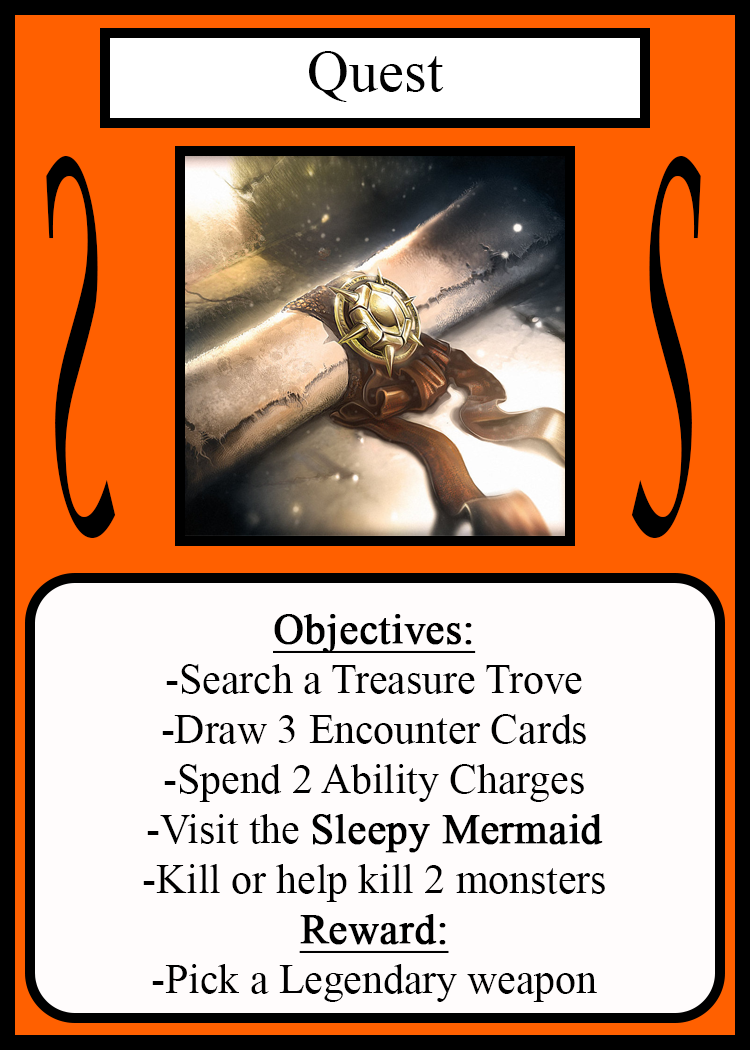
<style>
.page{position:relative;width:750px;height:1050px;background:#fffcfc}
.page>*{position:absolute;margin:0}
.t1{font:58.3px "TimesNewRomanPSMT";color:#010101}
.t2{font:504.3px "LucidaCalligraphy-Italic";color:#000000;scale:0.24 1}
.t3{font:504.1px "LucidaCalligraphy-Italic";color:#000000;scale:0.24 1}
.t4{font:41.7px "TimesNewRomanPSMT";color:#000000}
.t5{font:41.7px "TimesNewRomanPSMT";color:#000000;font-weight:bold;text-decoration:underline}
.t6{font:41.7px "TimesNewRomanPSMT";color:#000000;font-weight:bold}
</style>
<div class="page">
<p class="t1" style="left:309px;top:51px;width:135px;height:51px">Quest</p>
<p class="t2" style="left:46px;top:156px;width:70px;height:382px;rotate:180deg">S</p>
<p class="t3" style="left:631px;top:156px;width:70px;height:382px">S</p>
<p class="t4" style="left:143px;top:614px;width:462px;height:388px;text-align:center"><span class="t5">Objectives:<br></span>-Search a Treasure Trove<br>-Draw 3 Encounter Cards<br>-Spend 2 Ability Charges<br>-Visit the <span class="t6">Sleepy Mermaid<br></span>-Kill or help kill 2 monsters<br><span class="t5">Reward:</span><br>-Pick a Legendary weapon</p>
</div>
